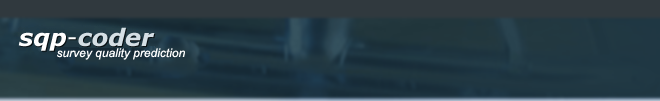
<style>
.page{position:relative;width:660px;height:101px}
.page>*{position:absolute;margin:0}
.t1{font:12px "Arial-ItalicMT";color:#ffffff}
</style>
<div class="page">
<p class="t1" style="left:57px;top:48px;width:128px;height:12px">survey quality prediction</p>
</div>
